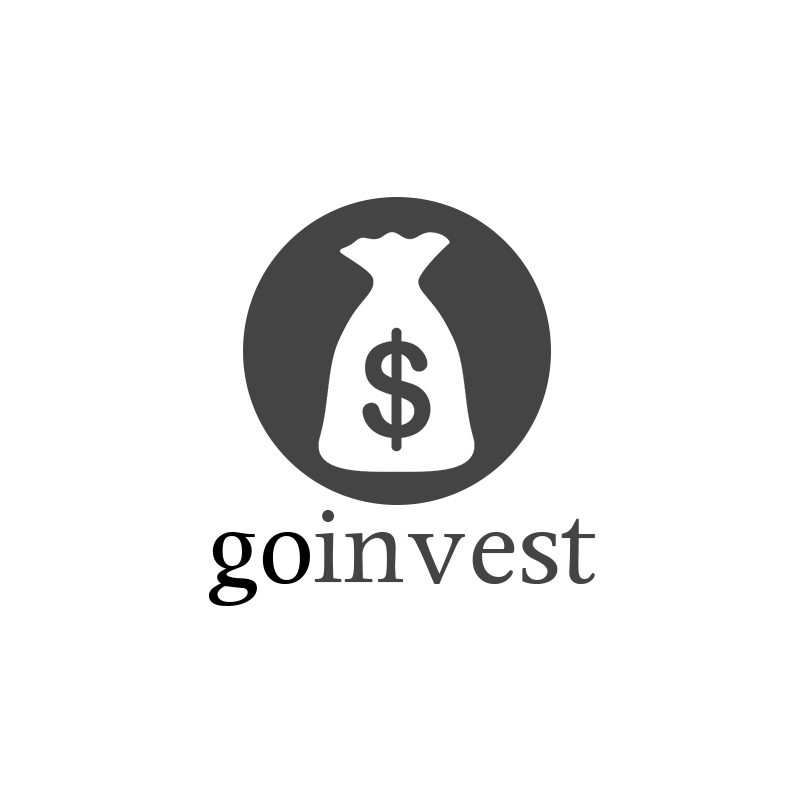
<style>
.page{position:relative;width:800px;height:800px;background:#ffffff}
.page>*{position:absolute;margin:0}
.t1{font:118.7px "JCkg";color:#444444}
.t2{font:118.7px "JCkg";color:#000000}
</style>
<div class="page">
<p class="t1" style="left:208px;top:510px;width:387px;height:96px"><span class="t2">go</span>invest</p>
</div>
